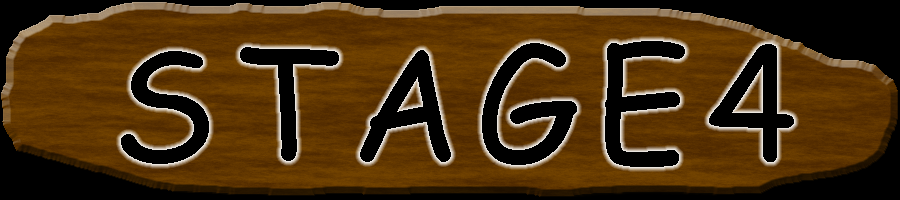
<style>
.page{position:relative;width:900px;height:200px;background:#000000}
.page>*{position:absolute;margin:0}
.t1{font:152px "ComicSansMS";letter-spacing:0.1em;color:#000000}
</style>
<div class="page">
<p class="t1" style="left:121px;top:41px;width:673px;height:126px">STAGE4</p>
</div>
